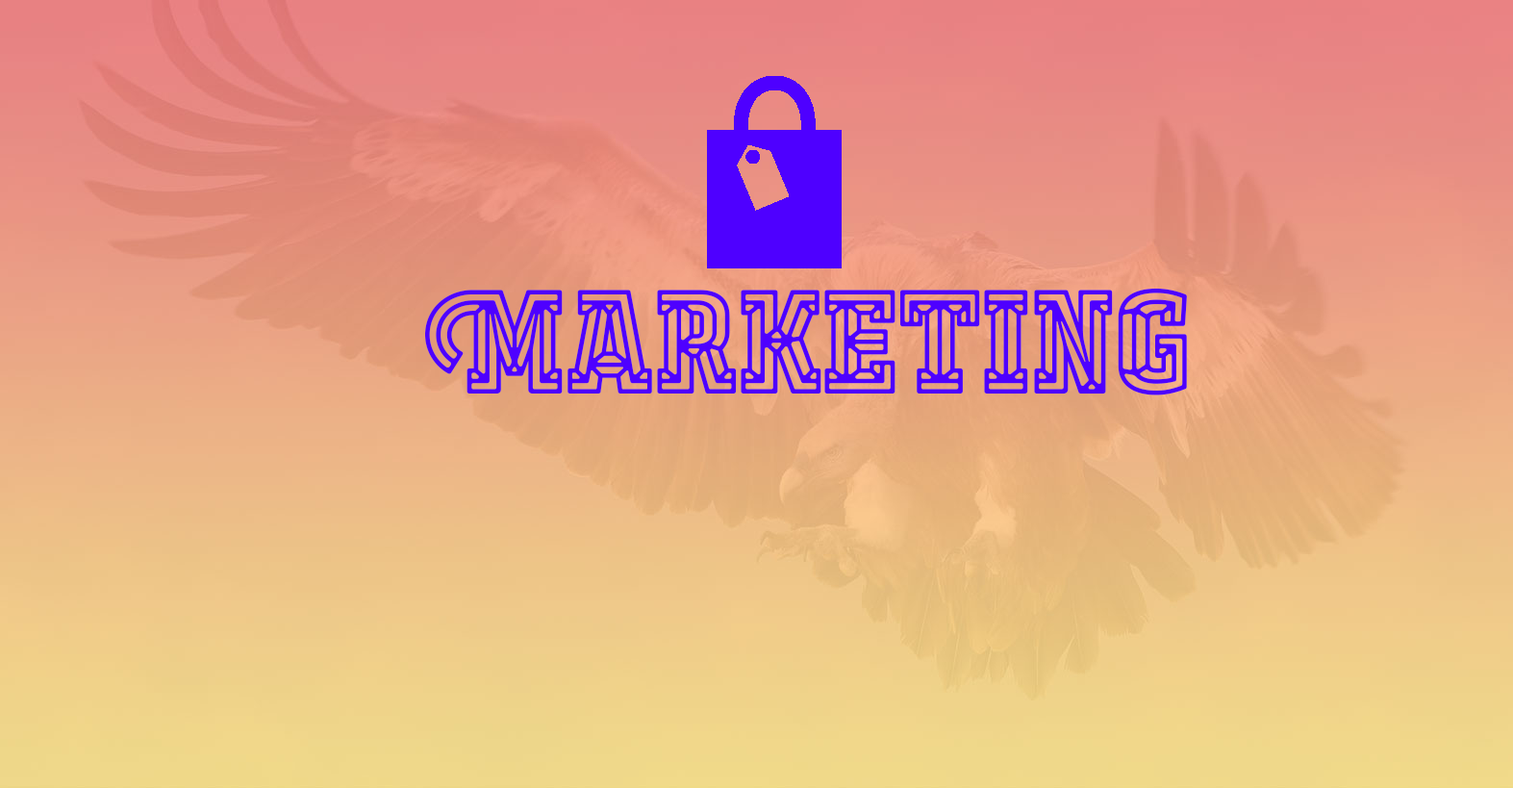
<style>
.page{position:relative;width:1513px;height:788px}
.page>*{position:absolute;margin:0}
.t1{font:144.3px "Welding-Regular";color:#4e00ff}
</style>
<div class="page">
<p class="t1" style="left:424px;top:288px;width:763px;height:107px">Marketing</p>
</div>
